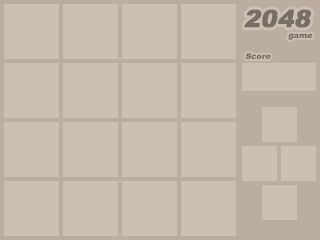
<style>
.page{position:relative;width:320px;height:240px;background:#ccc0b3}
.page>*{position:absolute;margin:0}
.t1{font:24px "Arial-Black";color:#776e65;font-weight:bold;font-style:italic}
.t2{font:8px "Arial-Black";color:#776e65;font-style:italic}
</style>
<div class="page">
<p class="t1" style="left:244px;top:9px;width:67px;height:19px">2048</p>
<p class="t2" style="left:288px;top:33px;width:25px;height:7px">game</p>
<p class="t2" style="left:245px;top:53px;width:26px;height:7px">Score</p>
</div>
